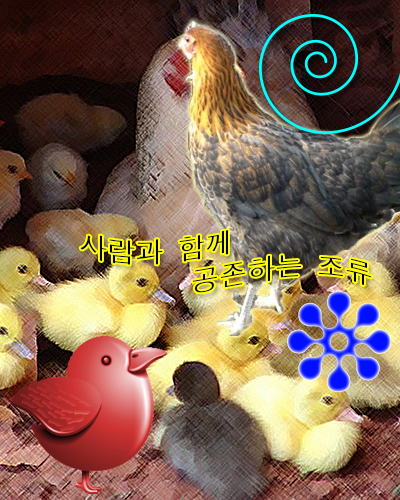
<style>
.page{position:relative;width:400px;height:500px}
.page>*{position:absolute;margin:0}
.t1{font:28px "DotumChe";color:#000033}
</style>
<div class="page">
<p class="t1" style="left:80px;top:230px;width:292px;height:63px">사람과 함께<br>        공존하는 조류</p>
</div>
